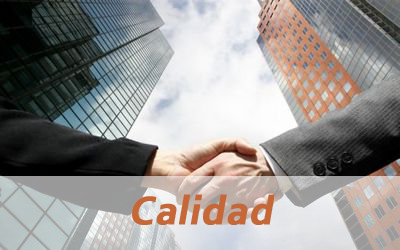
<style>
.page{position:relative;width:400px;height:250px}
.page>*{position:absolute;margin:0}
.t1{font:41.7px "Corbel-Bold";letter-spacing:0.005em;color:#c66738;font-weight:bold;font-style:italic}
</style>
<div class="page">
<p class="t1" style="left:132px;top:194px;width:143px;height:31px">Calidad</p>
</div>
